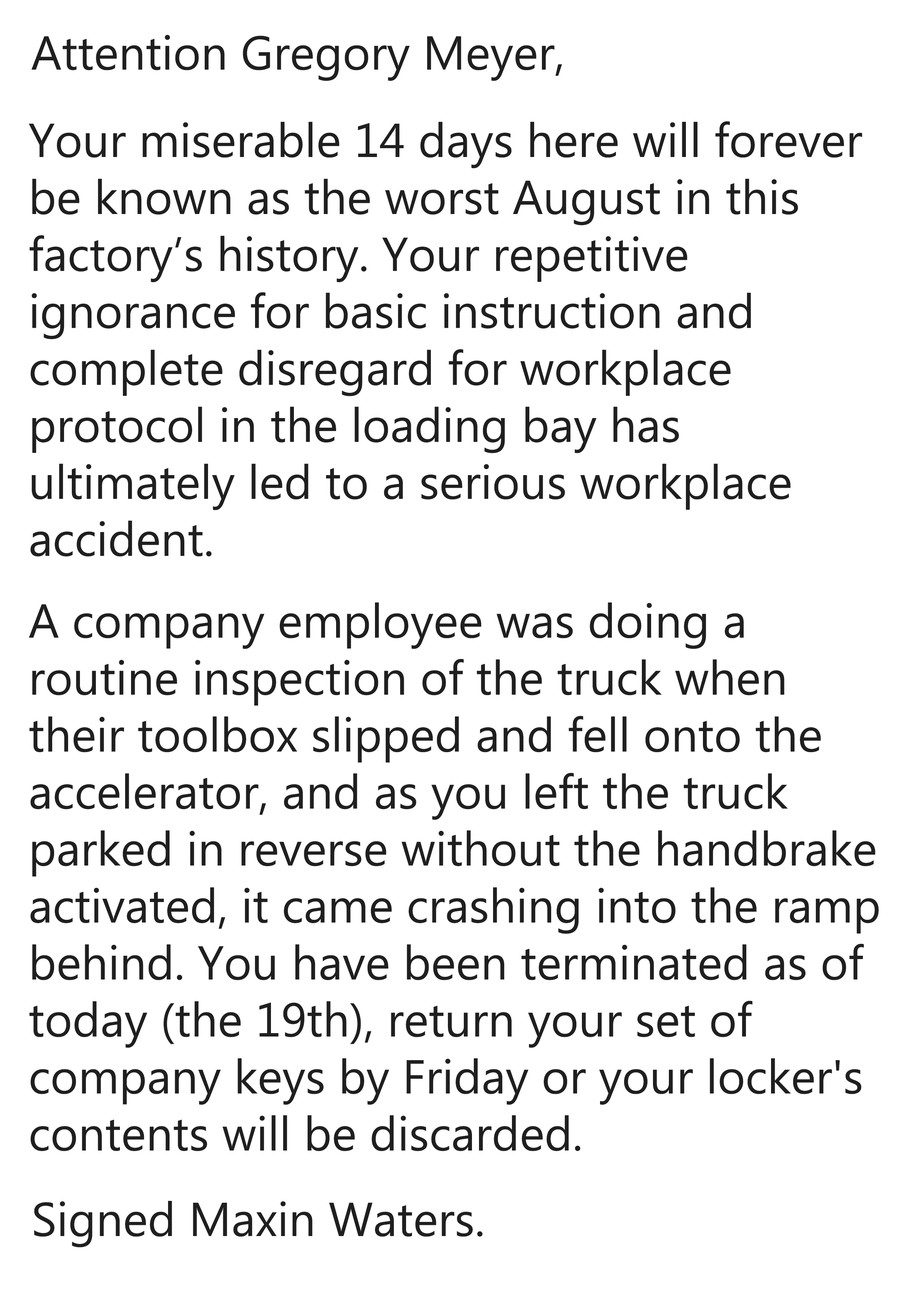
<style>
.page{position:relative;width:918px;height:1299px;background:#ffffff}
.page>*{position:absolute;margin:0}
.t1{font:47.5px "MicrosoftPhagsPa";color:#1f1f1f}
</style>
<div class="page">
<p class="t1" style="left:31px;top:35px;width:531px;height:46px">Attention Gregory Meyer,</p>
<p class="t1" style="left:29px;top:121px;width:833px;height:435px">Your miserable 14 days here will forever<br>be known as the worst August in this<br>factory’s history. Your repetitive <br>ignorance for basic instruction and <br>complete disregard for workplace <br>protocol in the loading bay has <br>ultimately led to a serious workplace <br>accident.</p>
<p class="t1" style="left:29px;top:602px;width:850px;height:549px">A company employee was doing a <br>routine inspection of the truck when <br>their toolbox slipped and fell onto the <br>accelerator, and as you left the truck <br>parked in reverse without the handbrake<br>activated, it came crashing into the ramp<br>behind. You have been terminated as of<br>today (the 19th), return your set of <br>company keys by Friday or your locker's<br>contents will be discarded.</p>
<p class="t1" style="left:34px;top:1201px;width:449px;height:46px">Signed Maxin Waters.</p>
</div>
